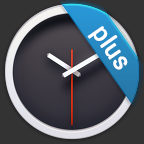
<style>
.page{position:relative;width:144px;height:144px;background:#333333}
.page>*{position:absolute;margin:0}
.t1{font:24px "Roboto-Regular";color:#ffffff;font-weight:bold}
</style>
<div class="page">
<p class="t1" style="left:87px;top:26px;width:41px;height:44px;rotate:55deg">plus</p>
</div>
